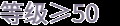
<style>
.page{position:relative;width:120px;height:26px;background:#000000}
.page>*{position:absolute;margin:0}
.t1{font:24px "WebPSD-18463539-0-Regular";color:#837a91;font-weight:bold}
</style>
<div class="page">
<p class="t1" style="left:0px;top:0px;width:120px;height:26px">等级≥50</p>
</div>
